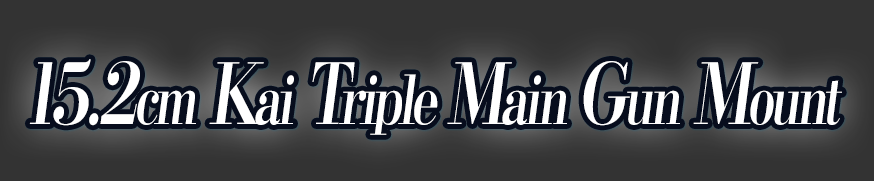
<style>
.page{position:relative;width:874px;height:181px;background:#333333}
.page>*{position:absolute;margin:0}
.t1{font:67.2px "KochoStd-Heavy";letter-spacing:-0.08em;color:#ffffff;font-style:italic;scale:0.74 1}
.t2{font:84px "KochoStd-Heavy";letter-spacing:-0.08em;color:#ffffff;font-style:italic;scale:0.74 1}
</style>
<div class="page">
<p class="t1" style="left:29px;top:59px;width:813px;height:76px"><span class="t2">15.2</span>cm<span class="t2"> K</span>ai <span class="t2">T</span>riple <span class="t2">M</span>ain <span class="t2">G</span>un<span class="t2"> M</span>ount</p>
</div>
